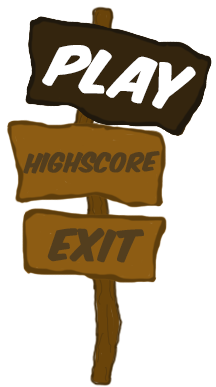
<style>
.page{position:relative;width:216px;height:387px;background:#ffffff}
.page>*{position:absolute;margin:0}
.t1{font:51.3px "KomikaAxis";color:#ffffff;font-weight:bold;font-style:italic}
.t2{font:22.7px "KomikaAxis";color:#533e1e;font-weight:bold;font-style:italic}
.t3{font:37.2px "KomikaAxis";color:#533e1e;font-weight:bold;font-style:italic}
</style>
<div class="page">
<p class="t1" style="left:42px;top:45px;width:154px;height:64px;rotate:11deg">Play</p>
<p class="t2" style="left:23px;top:151px;width:137px;height:23px;rotate:-1deg">highscore</p>
<p class="t3" style="left:47px;top:228px;width:97px;height:35px;rotate:1deg">exit</p>
</div>
